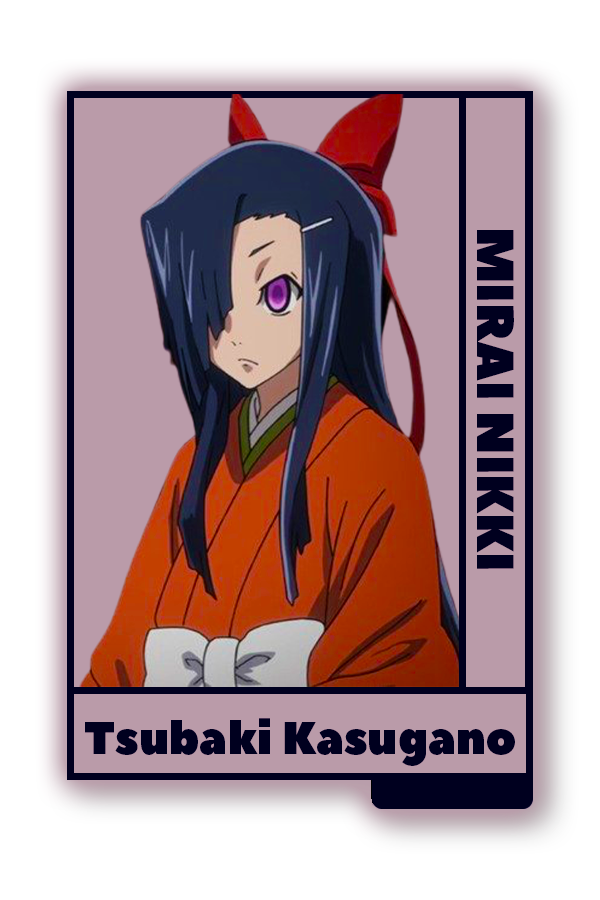
<style>
.page{position:relative;width:600px;height:900px;background:#ba9ba9}
.page>*{position:absolute;margin:0}
.t1{font:52px "PeaceSans";color:#00001b}
.t2{font:45.6px "PeaceSans";color:#00001b}
</style>
<div class="page">
<p class="t1" style="left:477px;top:230px;width:37px;height:339px;rotate:90deg">MIRAI NIKKI</p>
<p class="t2" style="left:85px;top:718px;width:430px;height:48px">Tsubaki Kasugano</p>
</div>
